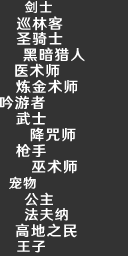
<style>
.page{position:relative;width:128px;height:256px;background:#333333}
.page>*{position:absolute;margin:0}
.t1{font:13.3px "HYWenHei-FEW";letter-spacing:0.08em;color:#ffffff}
.t2{font:14.7px "HYWenHei-FEW";letter-spacing:0.08em;color:#ffffff}
.t3{font:14px "HYWenHei-FEW";letter-spacing:0.08em;color:#ffffff}
</style>
<div class="page">
<p class="t1" style="left:24px;top:0px;width:28px;height:13px">剑士</p>
<p class="t2" style="left:16px;top:16px;width:47px;height:15px">巡林客</p>
<p class="t2" style="left:16px;top:32px;width:47px;height:13px">圣骑士</p>
<p class="t2" style="left:23px;top:47px;width:62px;height:15px">黑暗猎人</p>
<p class="t2" style="left:15px;top:63px;width:45px;height:15px">医术师</p>
<p class="t2" style="left:16px;top:79px;width:62px;height:15px">炼金术师</p>
<p class="t2" style="left:0px;top:95px;width:45px;height:15px">吟游者</p>
<p class="t2" style="left:16px;top:111px;width:30px;height:14px">武士</p>
<p class="t2" style="left:30px;top:127px;width:46px;height:15px">降咒师</p>
<p class="t2" style="left:16px;top:144px;width:30px;height:14px">枪手</p>
<p class="t2" style="left:32px;top:159px;width:45px;height:15px">巫术师</p>
<p class="t1" style="left:9px;top:176px;width:27px;height:13px">宠物</p>
<p class="t3" style="left:24px;top:192px;width:29px;height:14px">公主</p>
<p class="t3" style="left:24px;top:208px;width:44px;height:13px">法夫纳</p>
<p class="t2" style="left:15px;top:223px;width:62px;height:15px">高地之民</p>
<p class="t3" style="left:17px;top:240px;width:28px;height:13px">王子</p>
</div>
